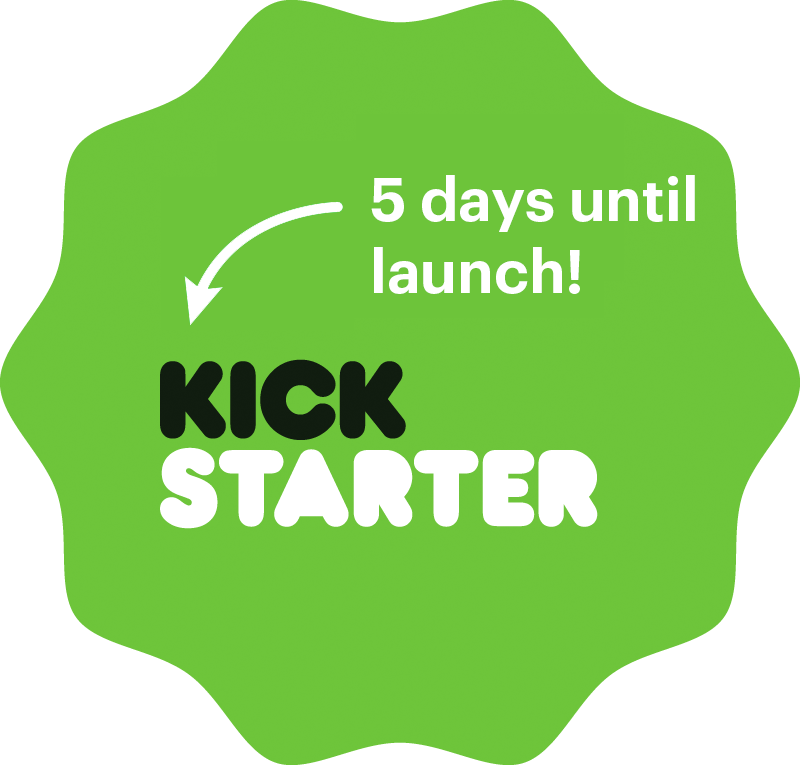
<style>
.page{position:relative;width:800px;height:765px;background:#ffffff}
.page>*{position:absolute;margin:0}
.t1{font:60px "Graphik-Semibold";color:#ffffff}
</style>
<div class="page">
<p class="t1" style="left:371px;top:175px;width:324px;height:119px">5 days until<br>launch!</p>
</div>
